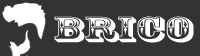
<style>
.page{position:relative;width:200px;height:56px;background:#333333}
.page>*{position:absolute;margin:0}
.t1{font:34px "RosewoodStd-Regular";color:#ffffff;scale:1.51 1}
</style>
<div class="page">
<p class="t1" style="left:54px;top:16px;width:140px;height:27px">Brico</p>
</div>
